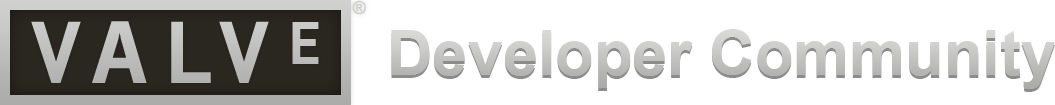
<style>
.page{position:relative;width:1055px;height:105px;background:#ffffff}
.page>*{position:absolute;margin:0}
.t1{font:18px "ArialMT";letter-spacing:0.05em;color:#cfcfce;text-transform:uppercase}
.t2{font:86px "DINPro-Bold";color:#c0c0bf;text-transform:uppercase}
.t3{font:78px "TitlingGothicFBNarrow-Medium";color:#bcbcbb;text-transform:uppercase}
.t4{font:86px "DINPro-Bold";letter-spacing:0.14em;color:#bdbdbc;text-transform:uppercase}
.t5{font:58.7px "DINOffc-Bold";color:#c3c3c2;text-transform:uppercase;scale:0.94 1}
.t6{font:63px "Arial-BoldMT";color:#c3c3c2}
</style>
<div class="page">
<p class="t1" style="left:352px;top:0px;width:14px;height:15px">®</p>
<p class="t2" style="left:31px;top:21px;width:50px;height:62px">V</p>
<p class="t3" style="left:92px;top:21px;width:55px;height:62px">a</p>
<p class="t4" style="left:171px;top:21px;width:98px;height:62px">LV</p>
<p class="t5" style="left:292px;top:22px;width:27px;height:42px">E</p>
<p class="t6" style="left:391px;top:29px;width:664px;height:60px">Developer Community</p>
</div>
